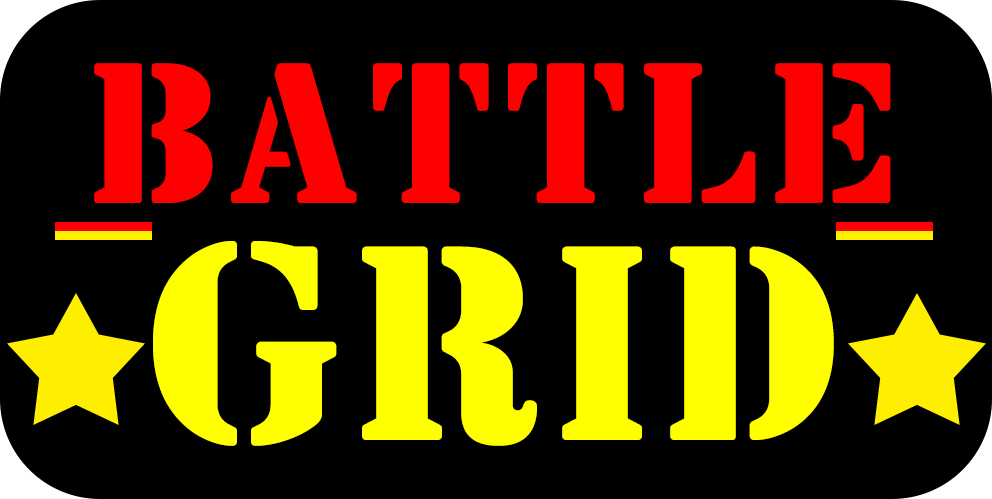
<style>
.page{position:relative;width:992px;height:499px;background:#000000}
.page>*{position:absolute;margin:0}
.t1{font:205.2px "SanDiego";color:#ff0000}
.t2{font:284.1px/236.8px "SanDiego";color:#ffff00}
</style>
<div class="page">
<p class="t1" style="left:94px;top:63px;width:797px;height:383px;text-align:center">BATTLE<br><span class="t2">GRID</span></p>
</div>
